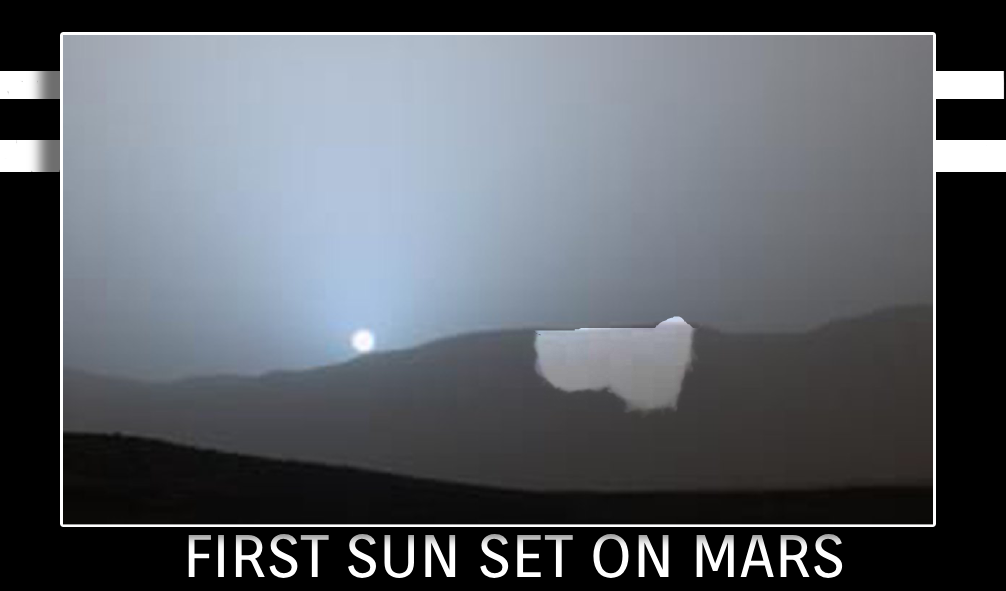
<style>
.page{position:relative;width:1006px;height:591px;background:#000000}
.page>*{position:absolute;margin:0}
.t1{font:60px "Orienta-Regular";color:#ffffff}
</style>
<div class="page">
<p class="t1" style="left:188px;top:534px;width:655px;height:44px">FIRST SUN SET ON MARS</p>
</div>
